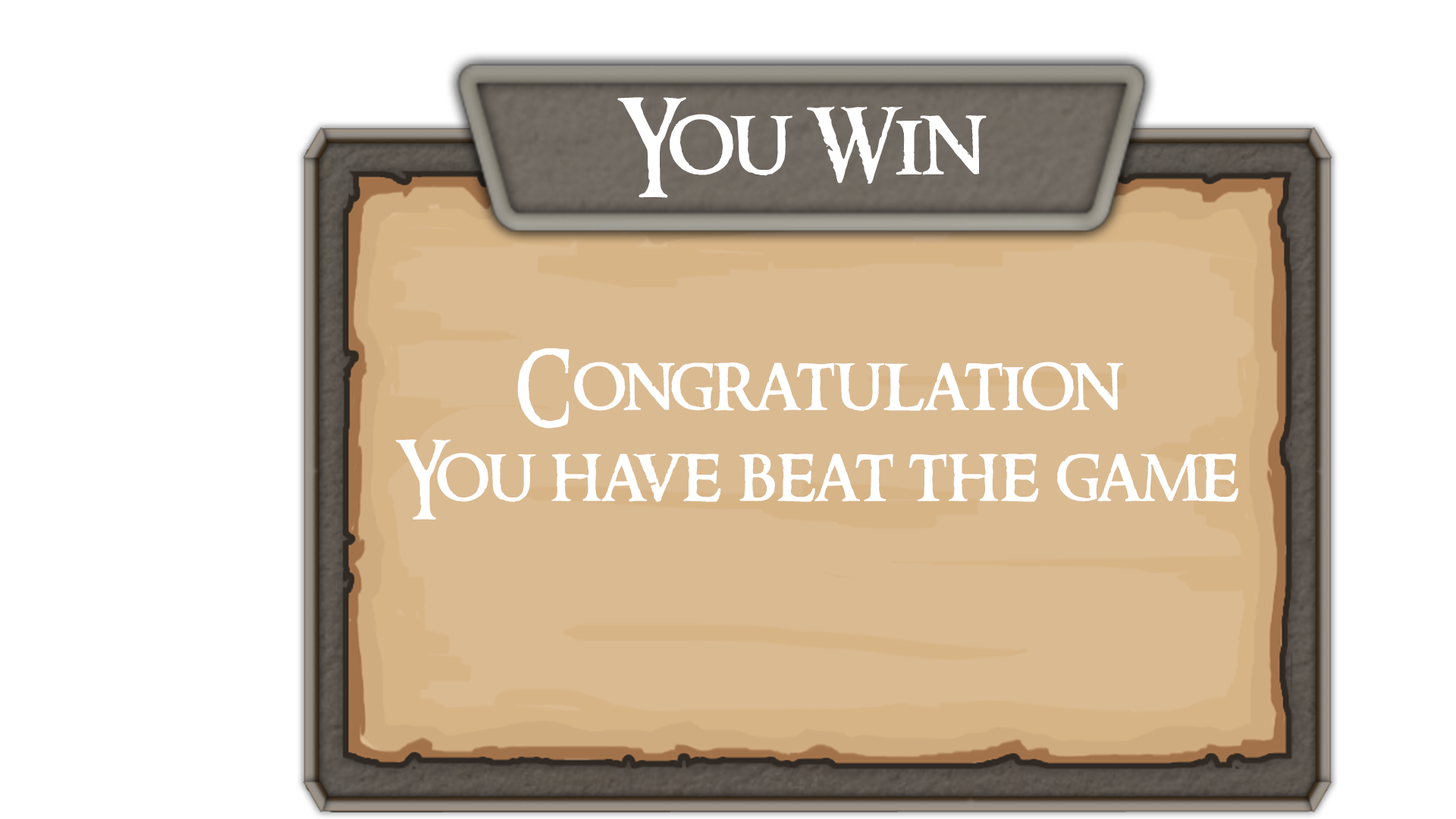
<style>
.page{position:relative;width:1456px;height:819px;background:#ffffff}
.page>*{position:absolute;margin:0}
.t1{font:94.8px "RingbearerMedium";color:#ffffff}
.t2{font:75.8px "RingbearerMedium";color:#ffffff}
</style>
<div class="page">
<p class="t1" style="left:617px;top:97px;width:370px;height:101px">You Win</p>
<p class="t2" style="left:395px;top:348px;width:843px;height:172px;text-align:center">Congratulation<br>You have beat the game</p>
</div>
